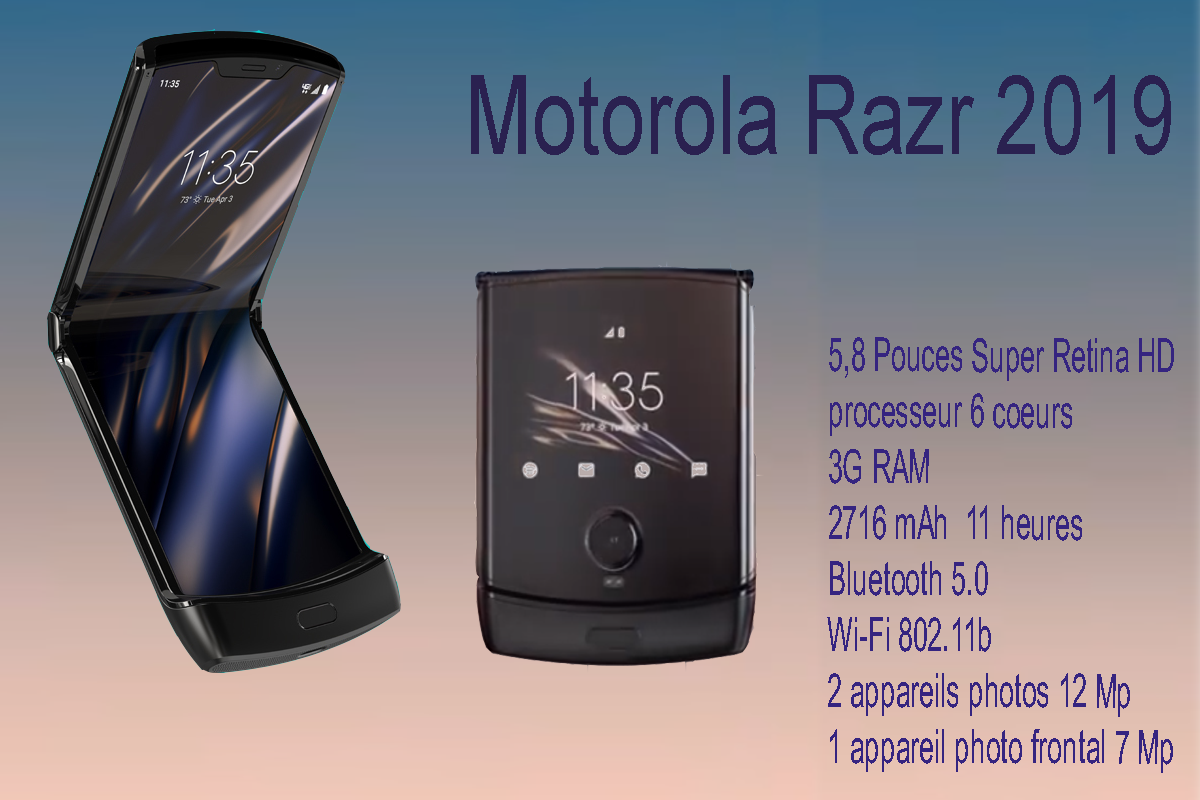
<style>
.page{position:relative;width:1200px;height:800px}
.page>*{position:absolute;margin:0}
.t1{font:109.9px "ArialMT";color:#2a2150;scale:0.74 1}
.t2{font:46.6px "ArialMT";color:#352480;scale:0.58 1}
</style>
<div class="page">
<p class="t1" style="left:471px;top:75px;width:700px;height:80px">Motorola Razr 2019</p>
<p class="t2" style="left:827px;top:337px;width:347px;height:436px">5,8 Pouces Super Retina HD <br>processeur 6 coeurs<br>3G RAM<br>2716 mAh  11 heures <br>Bluetooth 5.0<br>Wi-Fi 802.11b<br>2 appareils photos 12 Mp<br>1 appareil photo frontal 7 Mp</p>
</div>
